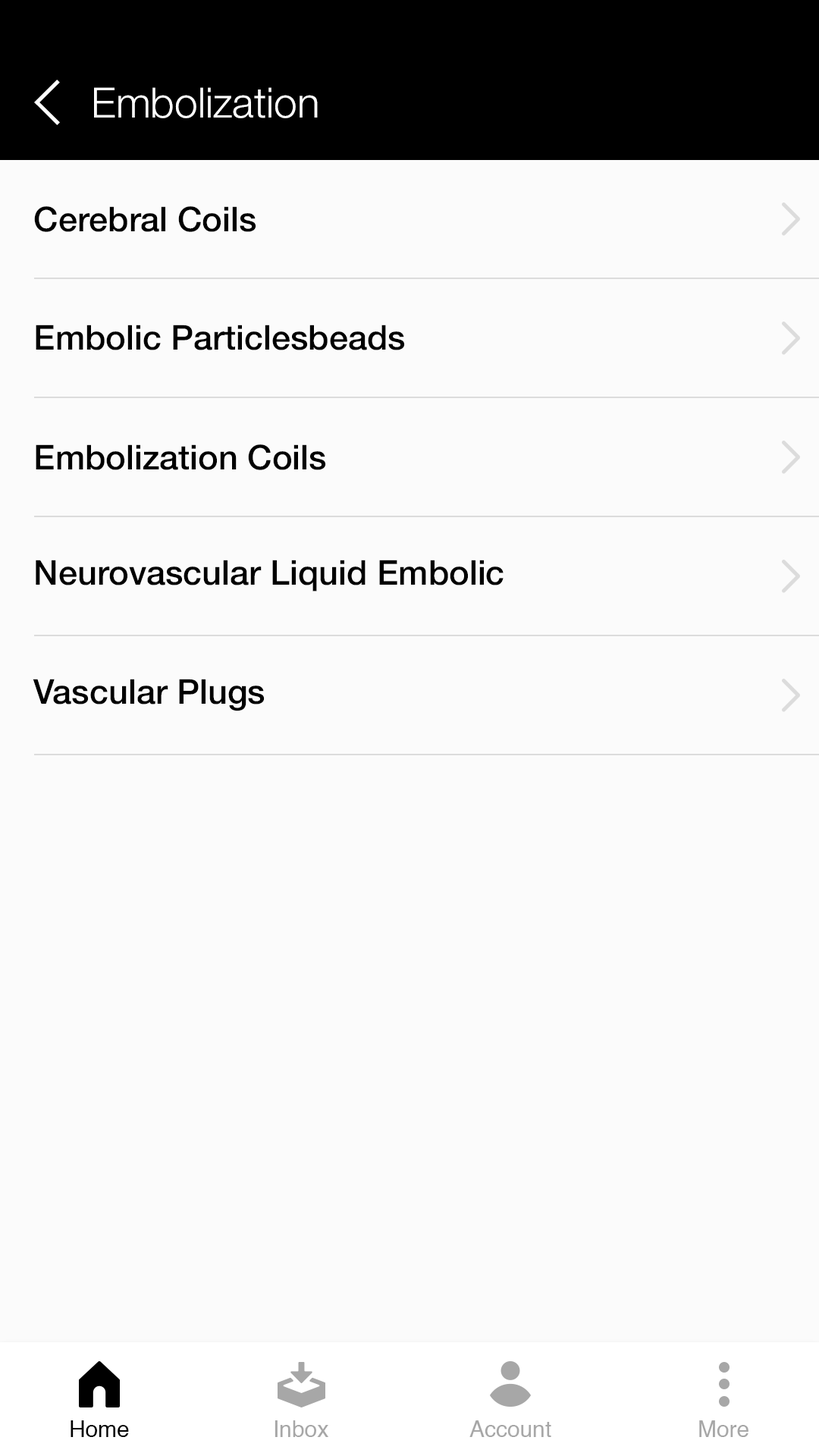
<style>
.page{position:relative;width:819px;height:1456px;background:#fbfbfb}
.page>*{position:absolute;margin:0}
.t1{font:41.7px "HelveticaNeue-Light";color:#ffffff}
.t2{font:34.1px "HelveticaNeue-Medium";color:#000000}
.t3{font:22.7px "Helvetica";color:#000000}
.t4{font:22.7px "Helvetica";color:#a7a7a7}
</style>
<div class="page">
<p class="t1" style="left:94px;top:87px;width:224px;height:31px">Embolization</p>
<p class="t2" style="left:34px;top:206px;width:222px;height:26px">Cerebral Coils</p>
<p class="t2" style="left:36px;top:325px;width:369px;height:25px">Embolic Particlesbeads</p>
<p class="t2" style="left:36px;top:444px;width:290px;height:26px">Embolization Coils</p>
<p class="t2" style="left:36px;top:560px;width:468px;height:31px">Neurovascular Liquid Embolic</p>
<p class="t2" style="left:33px;top:679px;width:232px;height:32px">Vascular Plugs</p>
<p class="t3" style="left:71px;top:1420px;width:58px;height:17px">Home</p>
<p class="t4" style="left:275px;top:1420px;width:53px;height:17px">Inbox</p>
<p class="t4" style="left:469px;top:1420px;width:82px;height:17px">Account</p>
<p class="t4" style="left:699px;top:1420px;width:49px;height:17px">More</p>
</div>
